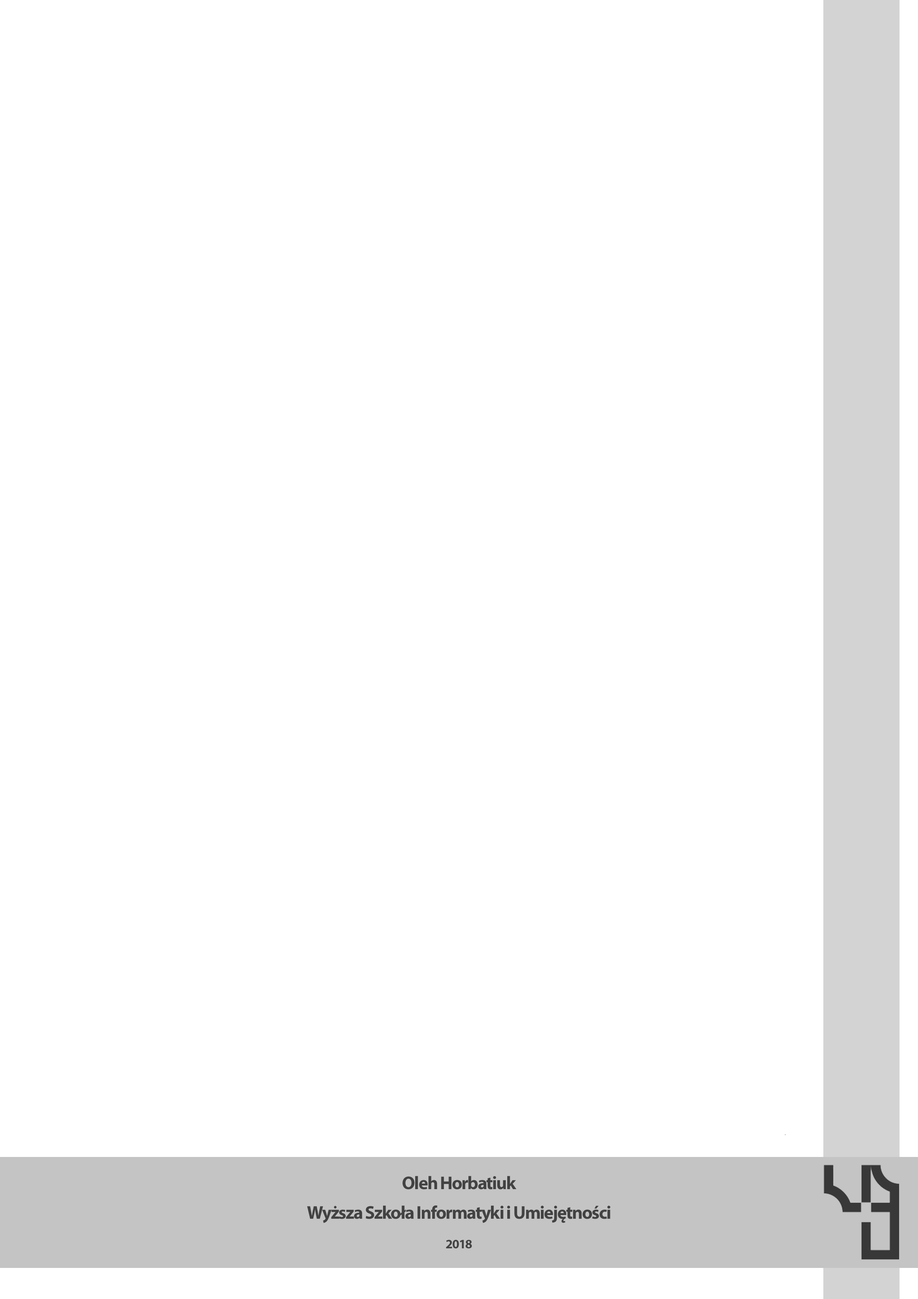
<style>
.page{position:relative;width:918px;height:1299px;background:#ffffff}
.page>*{position:absolute;margin:0}
.t1{font:18.5px/14.8px "MyriadPro-Bold";letter-spacing:-0.05em;color:#424242}
.t2{font:12.9px/14.8px "MyriadPro-Bold";letter-spacing:-0.05em;color:#424242}
</style>
<div class="page">
<p class="t1" style="left:307px;top:1176px;width:304px;height:72px;text-align:center">Oleh Horbatiuk<br><br>Wyższa Szkoła Informatyki i Umiejętności<br><br><span class="t2">2018</span></p>
</div>
